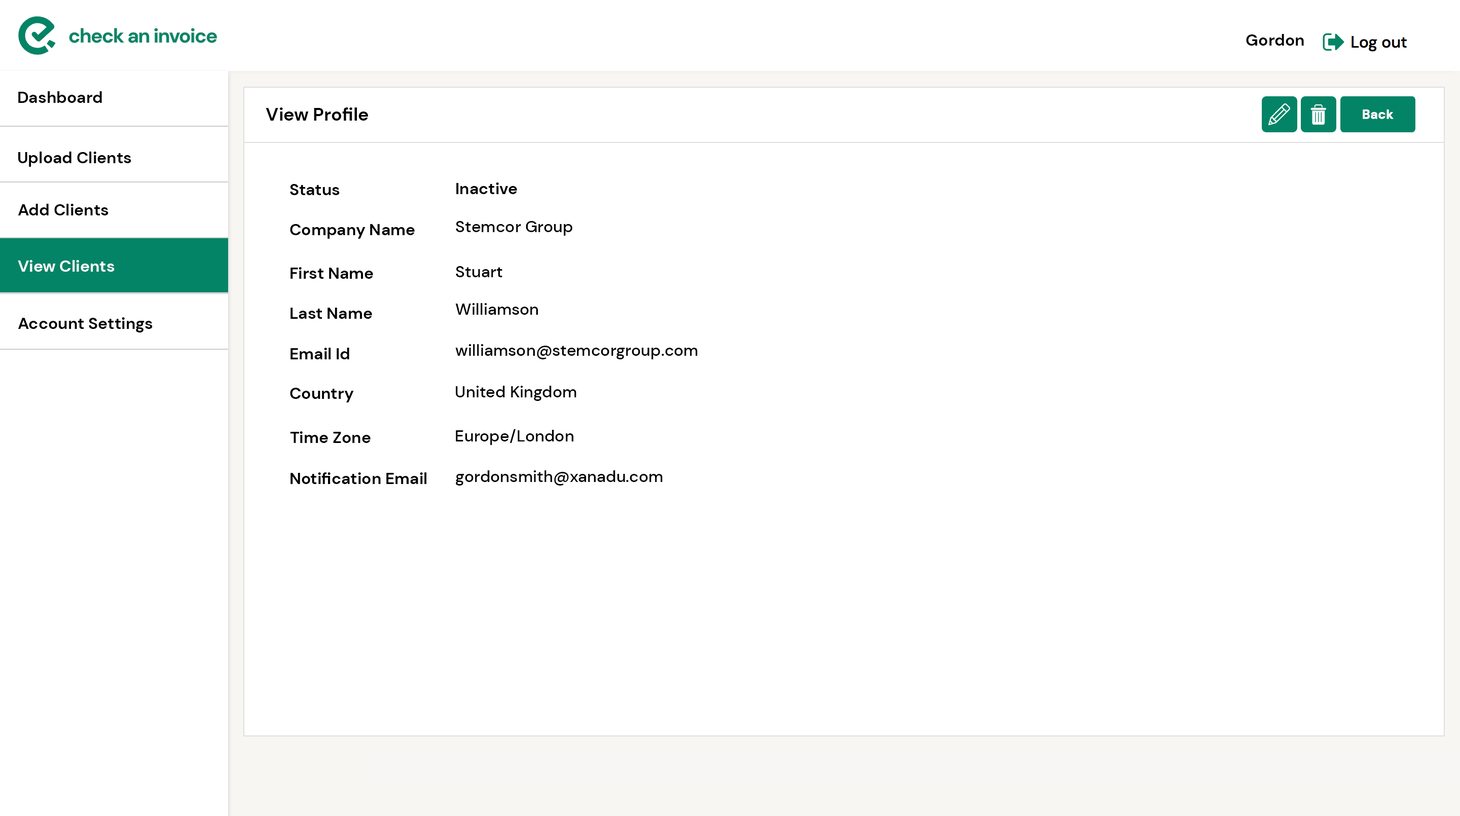
<style>
.page{position:relative;width:1460px;height:816px;background:#ffffff}
.page>*{position:absolute;margin:0}
.t1{font:16.2px "DMSans-Bold";color:#000000}
.t2{font:18.3px "DMSans-Bold";color:#010101}
.t3{font:12.7px "DMSans-Bold";color:#ffffff;font-weight:bold}
.t4{font:16.2px "DMSans-Medium";color:#000000}
.t5{font:16.2px "DMSans-Bold";color:#ffffff}
</style>
<div class="page">
<p class="t1" style="left:1246px;top:34px;width:58px;height:12px">Gordon</p>
<p class="t1" style="left:18px;top:91px;width:84px;height:12px">Dashboard</p>
<p class="t2" style="left:266px;top:108px;width:102px;height:13px">View Profile</p>
<p class="t3" style="left:1363px;top:110px;width:31px;height:9px">Back</p>
<p class="t1" style="left:18px;top:152px;width:113px;height:15px">Upload Clients</p>
<p class="t1" style="left:290px;top:184px;width:50px;height:11px">Status</p>
<p class="t1" style="left:456px;top:183px;width:61px;height:11px">Inactive</p>
<p class="t1" style="left:18px;top:204px;width:91px;height:12px">Add Clients</p>
<p class="t4" style="left:456px;top:221px;width:117px;height:15px">Stemcor Group</p>
<p class="t1" style="left:290px;top:224px;width:125px;height:15px">Company Name</p>
<p class="t5" style="left:18px;top:260px;width:97px;height:12px">View Clients</p>
<p class="t1" style="left:291px;top:267px;width:82px;height:12px">First Name</p>
<p class="t4" style="left:456px;top:266px;width:47px;height:11px">Stuart</p>
<p class="t4" style="left:455px;top:303px;width:83px;height:12px">Williamson</p>
<p class="t1" style="left:18px;top:317px;width:135px;height:16px">Account Settings</p>
<p class="t1" style="left:291px;top:308px;width:81px;height:11px">Last Name</p>
<p class="t1" style="left:291px;top:348px;width:58px;height:12px">Email Id</p>
<p class="t4" style="left:455px;top:344px;width:243px;height:16px">williamson@stemcorgroup.com</p>
<p class="t1" style="left:290px;top:388px;width:64px;height:15px">Country</p>
<p class="t4" style="left:456px;top:386px;width:121px;height:15px">United Kingdom</p>
<p class="t1" style="left:290px;top:432px;width:81px;height:11px">Time Zone</p>
<p class="t4" style="left:456px;top:429px;width:118px;height:16px">Europe/London</p>
<p class="t1" style="left:291px;top:473px;width:136px;height:11px">Notification Email</p>
<p class="t4" style="left:456px;top:471px;width:207px;height:15px">gordonsmith@xanadu.com</p>
</div>
